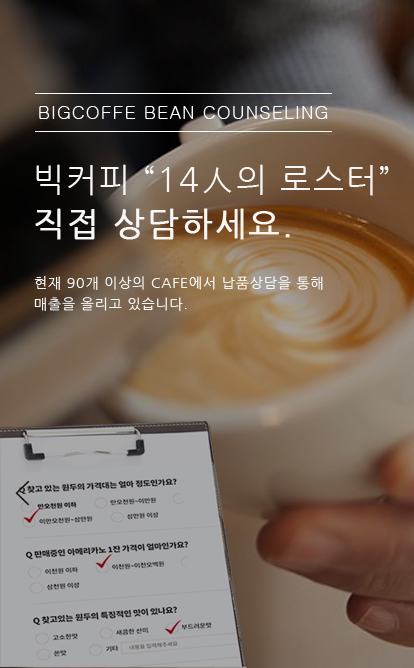
<style>
.page{position:relative;width:414px;height:668px}
.page>*{position:absolute;margin:0}
.t1{font:18px "Gulim";letter-spacing:0.06em;color:#ffffff}
.t2{font:33px/44px "NanumGothic";letter-spacing:0.06em;color:#f7f7f7;font-weight:bold}
.t3{font:33px/44px "NanumGothic";letter-spacing:0.06em;color:#f7f7f7}
.t4{font:33px/44px "Gulim";letter-spacing:0.06em;color:#f7f7f7}
.t5{font:14px/21px "NanumGothic";letter-spacing:0.06em;color:#f7f7f7}
</style>
<div class="page">
<p class="t1" style="left:39px;top:106px;width:289px;height:13px">BIGCOFFE BEAN COUNSELING</p>
<p class="t2" style="left:35px;top:164px;width:354px;height:76px"><span class="t3">빅커피 “14</span><span class="t4">人</span><span class="t3">의 로스터”<br></span>직접 상담하세요.</p>
<p class="t5" style="left:34px;top:276px;width:289px;height:35px">현재 90개 이상의 CAFE에서 납품상담을 통해<br>매출을 올리고 있습니다.</p>
</div>
